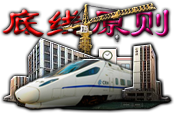
<style>
.page{position:relative;width:174px;height:140px;background:#ffffff}
.page>*{position:absolute;margin:0}
.t1{font:42.9px "LiSu"}
</style>
<div class="page">
<p class="t1" style="left:3px;top:9px;width:166px;height:28px">底线原则</p>
</div>
